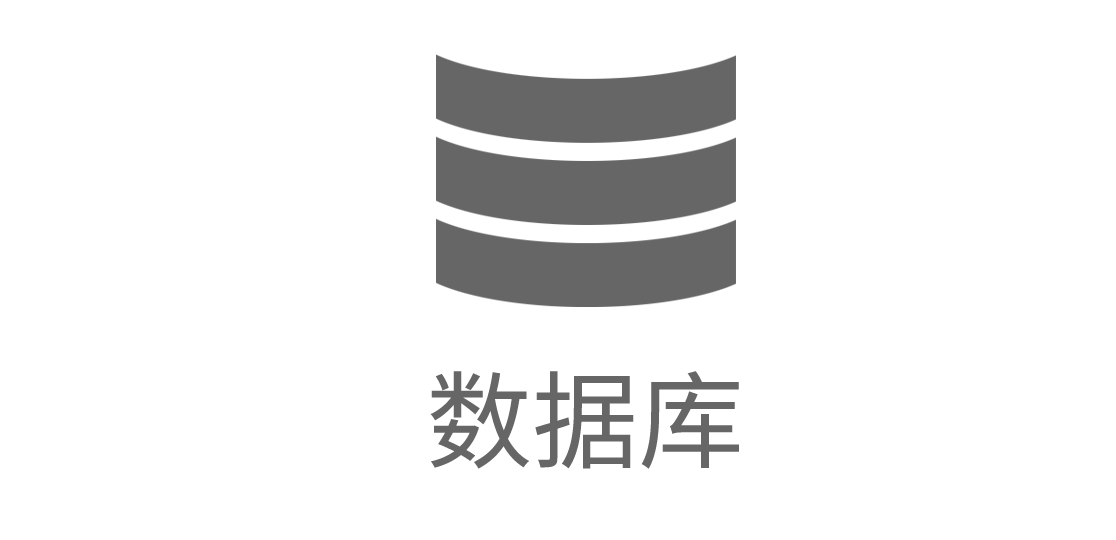
<style>
.page{position:relative;width:1116px;height:540px;background:#ffffff}
.page>*{position:absolute;margin:0}
.t1{font:106px "NotoSansCJKsc-Regular";color:#666666}
</style>
<div class="page">
<p class="t1" style="left:430px;top:371px;width:309px;height:98px">数据库</p>
</div>
